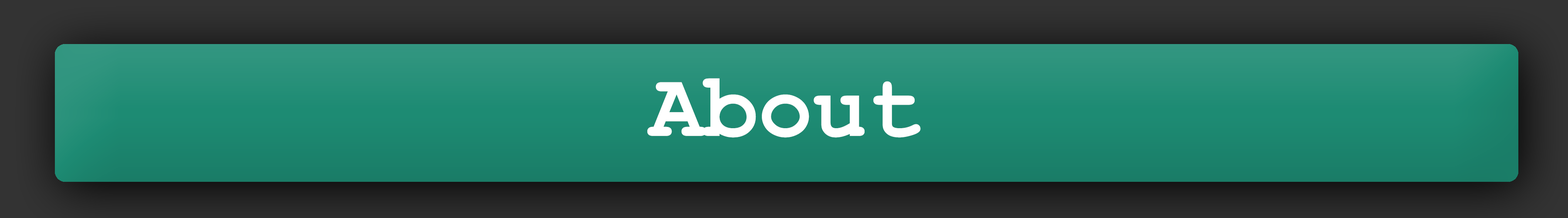
<style>
.page{position:relative;width:1568px;height:218px}
.page>*{position:absolute;margin:0}
.t1{font:90.6px "CourierNewPS-BoldMT";color:#ffffff}
</style>
<div class="page">
<p class="t1" style="left:647px;top:78px;width:274px;height:60px">About</p>
</div>
